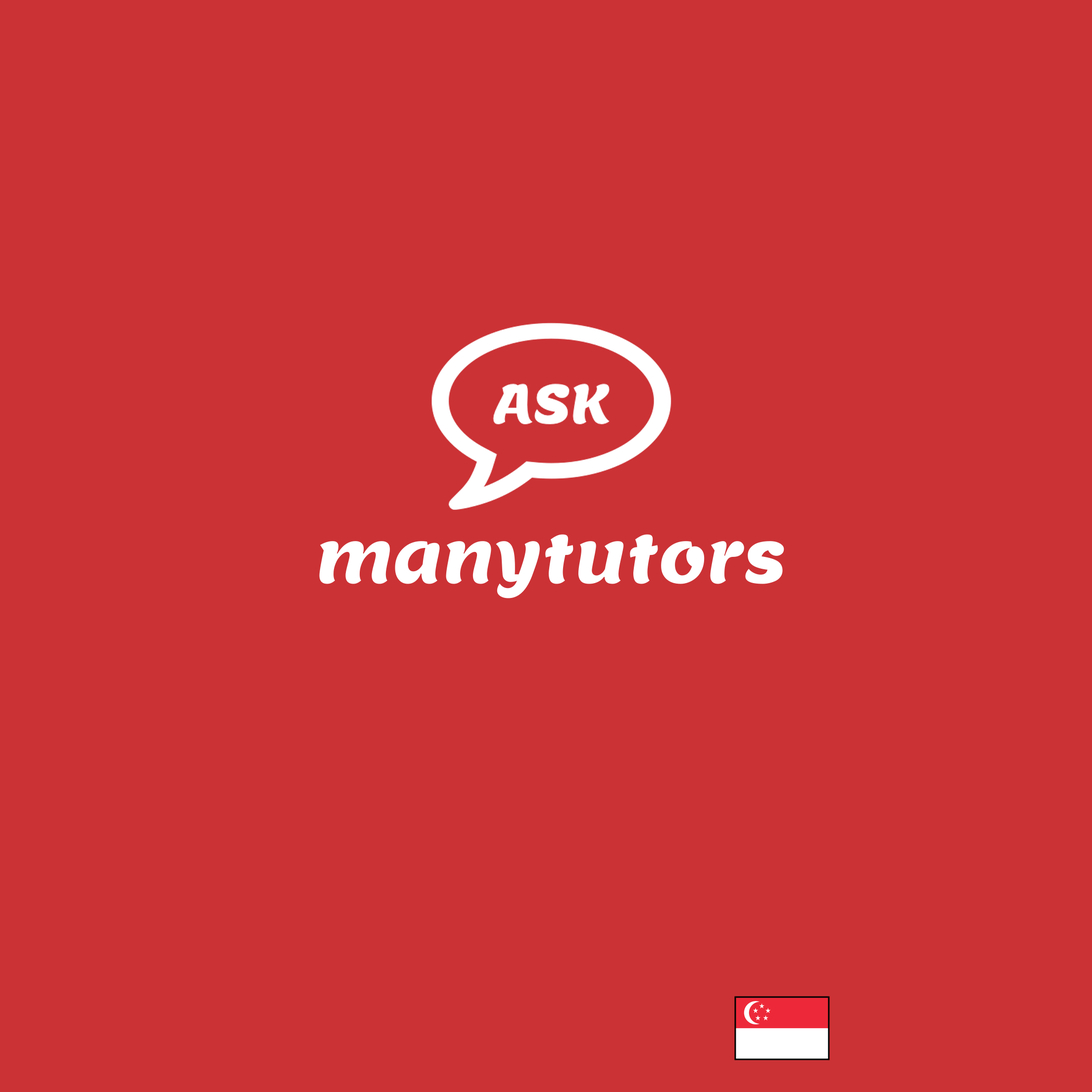
<style>
.page{position:relative;width:1092px;height:1092px;background:#cb3235}
.page>*{position:absolute;margin:0}
.t1{font:68px "Lemon-Regular";color:#ffffff}
</style>
<div class="page">
<p class="t1" style="left:319px;top:534px;width:465px;height:65px">manytutors</p>
</div>
